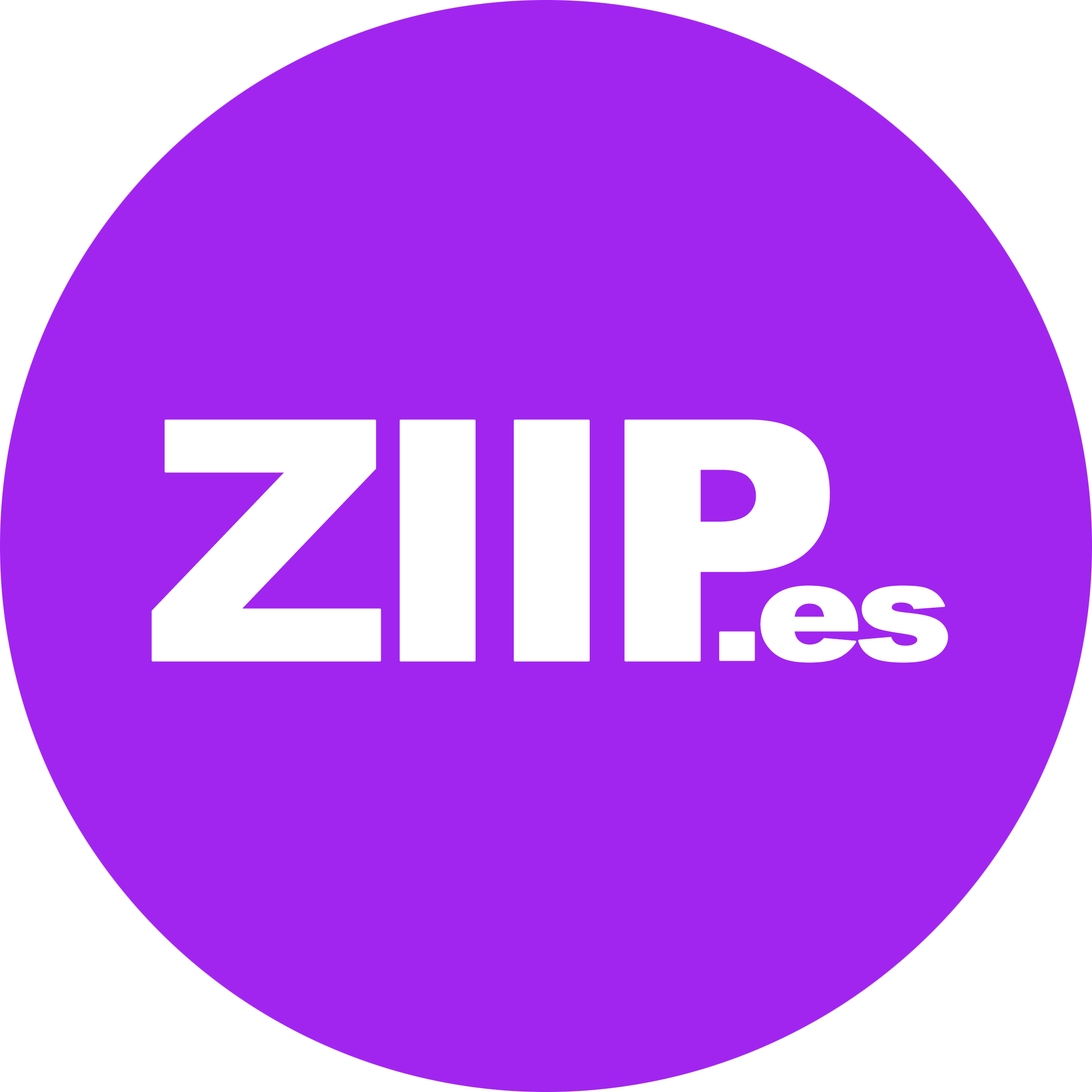
<style>
.page{position:relative;width:1092px;height:1092px;background:#a125ef}
.page>*{position:absolute;margin:0}
.t1{font:335.2px "Arial-Black";letter-spacing:-0.075em;color:#ffffff;font-weight:bold}
.t2{font:139.1px "Arial-Black";letter-spacing:-0.075em;color:#ffffff;font-weight:bold;scale:1.15 1}
</style>
<div class="page">
<p class="t1" style="left:151px;top:419px;width:679px;height:243px">ZIIP</p>
<p class="t2" style="left:719px;top:585px;width:229px;height:78px">.es</p>
</div>
